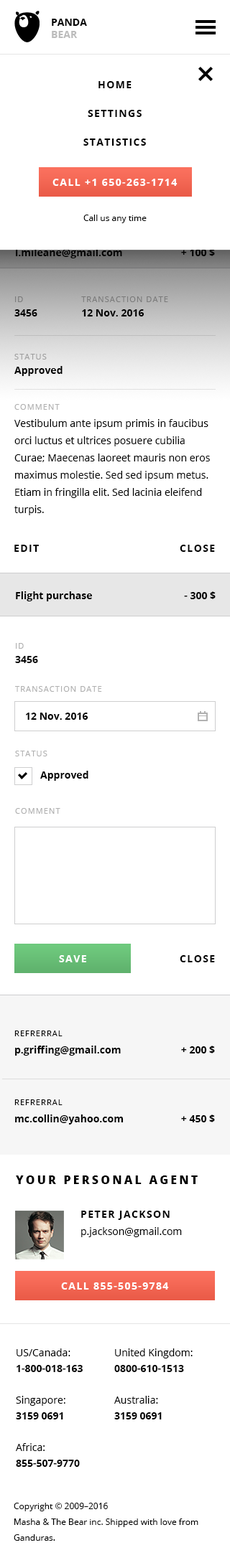
<style>
.page{position:relative;width:230px;height:1568px;background:#ffffff}
.page>*{position:absolute;margin:0}
.t1{font:10px/12.2px "OpenSans-Bold";color:#000000;text-transform:uppercase}
.t2{font:10px/12.2px "OpenSans-Bold";color:#bcbcbc;text-transform:uppercase}
.t3{font:10px/28.7px "OpenSans-Bold";letter-spacing:0.1em;color:#000000;text-transform:uppercase}
.t4{font:10px/17.2px "OpenSans-Bold";color:#ffffff}
.t5{font:7.9px/17.2px "OpenSans";letter-spacing:0.1em;color:#ffffff;text-transform:uppercase}
.t6{font:10px "OpenSans-Bold";letter-spacing:0.1em;color:#ffffff;text-transform:uppercase}
.t7{font:8.6px "OpenSans";color:#000000}
.t8{font:10px/14.4px "OpenSans-Bold";color:#000000}
.t9{font:7.9px/14.4px "OpenSans";letter-spacing:0.1em;color:#000000;text-transform:uppercase}
.t10{font:10px "OpenSans-Bold";color:#000000}
.t11{font:10px/17.2px "OpenSans";color:#000000}
.t12{font:7.9px/43.1px "OpenSans";letter-spacing:0.1em;color:#b0b0b0;text-transform:uppercase}
.t13{font:10px/14.4px "OpenSans-Bold";letter-spacing:0.001em;color:#000000}
.t14{font:7.9px/28.7px "OpenSans";letter-spacing:0.1em;color:#b0b0b0;text-transform:uppercase}
.t15{font:7.9px/35.9px "OpenSans";letter-spacing:0.1em;color:#b0b0b0;text-transform:uppercase}
.t16{font:7.9px/35.9px "OpenSans";letter-spacing:0.1em;text-transform:uppercase}
.t17{font:10px/14.4px "OpenSans-Bold";letter-spacing:0.001em}
.t18{font:10px "OpenSans-Bold";letter-spacing:0.1em;color:#000000;text-transform:uppercase}
.t19{font:10px "OpenSans-Bold";letter-spacing:0.001em;color:#000000}
.t20{font:10px/17.2px "OpenSans-Bold";color:#000000}
.t21{font:7.9px/17.2px "OpenSans";letter-spacing:0.1em;color:#000000;text-transform:uppercase}
.t22{font:11.5px "OpenSans-Extrabold";letter-spacing:0.2em;color:#000000;text-transform:uppercase}
.t23{font:10px/17.2px "OpenSans-Bold";letter-spacing:0.1em;color:#000000;text-transform:uppercase}
.t24{font:10px/15.8px "OpenSans-Bold";color:#000000}
.t25{font:10px/15.8px "OpenSans";color:#000000}
.t26{font:8.6px/15.8px "OpenSans";color:#000000}
</style>
<div class="page">
<p class="t1" style="left:52px;top:19px;width:35px;height:19px">panda <br><span class="t2">bear</span></p>
<p class="t1" style="left:52px;top:19px;width:35px;height:19px">panda <br><span class="t2">bear</span></p>
<p class="t3" style="left:83px;top:81px;width:63px;height:65px;text-align:center">home<br>settings<br>statistics</p>
<p class="t4" style="left:14px;top:180px;width:106px;height:25px"><span class="t5">refrerral<br></span>p.griffing@gmail.com</p>
<p class="t6" style="left:52px;top:179px;width:125px;height:7px">call +1 650-263-1714</p>
<p class="t7" style="left:83px;top:215px;width:63px;height:8px">Call us any time</p>
<p class="t8" style="left:15px;top:236px;width:107px;height:22px"><span class="t9">refrerral<br></span>l.mileane@gmail.com</p>
<p class="t10" style="left:181px;top:248px;width:34px;height:8px">+ 100 $</p>
<p class="t11" style="left:14px;top:296px;width:196px;height:219px"><span class="t12">ID<br></span><span class="t13">3456<br><br></span><span class="t14">status<br></span><span class="t8">Approved<br></span><span class="t15">comment<br></span>Vestibulum ante ipsum primis in faucibus orci luctus et ultrices posuere cubilia Curae; Maecenas laoreet mauris non eros maximus molestie. Sed sed ipsum metus. Etiam in fringilla elit. Sed lacinia eleifend turpis.</p>
<p class="t16" style="left:81px;top:296px;width:87px;height:20px">transaction date<br><span class="t17">12 Nov. 2016</span></p>
<p class="t18" style="left:14px;top:545px;width:25px;height:7px">edit</p>
<p class="t18" style="left:179px;top:545px;width:36px;height:7px">close</p>
<p class="t10" style="left:16px;top:591px;width:76px;height:10px">Flight purchase</p>
<p class="t10" style="left:184px;top:591px;width:31px;height:8px">- 300 $</p>
<p class="t14" style="left:15px;top:643px;width:87px;height:171px"><span class="t12">ID<br></span><span class="t13">3456<br></span>transaction date<br><br><span class="t15">status<br></span><br>comment</p>
<p class="t19" style="left:26px;top:713px;width:62px;height:7px">12 Nov. 2016</p>
<p class="t10" style="left:40px;top:771px;width:48px;height:10px">Approved</p>
<p class="t6" style="left:59px;top:955px;width:27px;height:7px">save</p>
<p class="t18" style="left:179px;top:955px;width:36px;height:7px">close</p>
<p class="t20" style="left:14px;top:1031px;width:107px;height:25px"><span class="t21">refrerral<br></span>p.griffing@gmail.com</p>
<p class="t10" style="left:181px;top:1046px;width:34px;height:7px">+ 200 $</p>
<p class="t20" style="left:14px;top:1099px;width:109px;height:26px"><span class="t21">refrerral<br></span>mc.collin@yahoo.com</p>
<p class="t10" style="left:181px;top:1114px;width:34px;height:8px">+ 450 $</p>
<p class="t22" style="left:16px;top:1175px;width:181px;height:9px">Your personal agent</p>
<p class="t11" style="left:81px;top:1211px;width:101px;height:26px"><span class="t23">Peter Jackson<br></span>p.jackson@gmail.com</p>
<p class="t6" style="left:61px;top:1282px;width:108px;height:8px">call 855-505-9784</p>
<p class="t24" style="left:16px;top:1348px;width:67px;height:119px"><span class="t25">US/Canada:<br></span>1-800-018-163<br><br><span class="t25">Singapore:<br></span>3159 0691<br><br><span class="t25">Africa: <br></span>855-507-9770</p>
<p class="t25" style="left:114px;top:1348px;width:78px;height:71px">United Kingdom:<br><span class="t24">0800-610-1513<br><br></span>Australia:<br><span class="t24">3159 0691</span></p>
<p class="t26" style="left:14px;top:1503px;width:184px;height:38px">Copyright © 2009–2016 <br>Masha &amp; The Bear inc. Shipped with love from Ganduras.</p>
</div>
